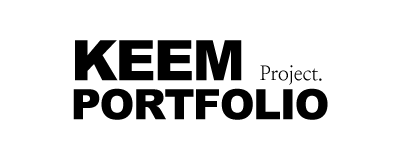
<style>
.page{position:relative;width:400px;height:160px;background:#ffffff}
.page>*{position:absolute;margin:0}
.t1{font:42px/39px "Arial-Black";letter-spacing:-0.035em;color:#000000}
.t2{font:56px/39px "Arial-Black";letter-spacing:-0.035em;color:#000000}
.t3{font:20px "NanumMyeongjo";letter-spacing:-0.015em;color:#000000}
</style>
<div class="page">
<p class="t1" style="left:73px;top:40px;width:255px;height:80px"><span class="t2">KEEM<br></span>PORTFOLIO</p>
<p class="t3" style="left:260px;top:65px;width:62px;height:20px">Project.</p>
</div>
